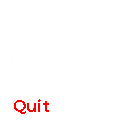
<style>
.page{position:relative;width:128px;height:128px;background:#ffffff}
.page>*{position:absolute;margin:0}
.t1{font:16px "Montserrat-SemiBold";letter-spacing:0.005em;color:#ff0000}
</style>
<div class="page">
<p class="t1" style="left:14px;top:99px;width:35px;height:15px">Quit</p>
</div>
